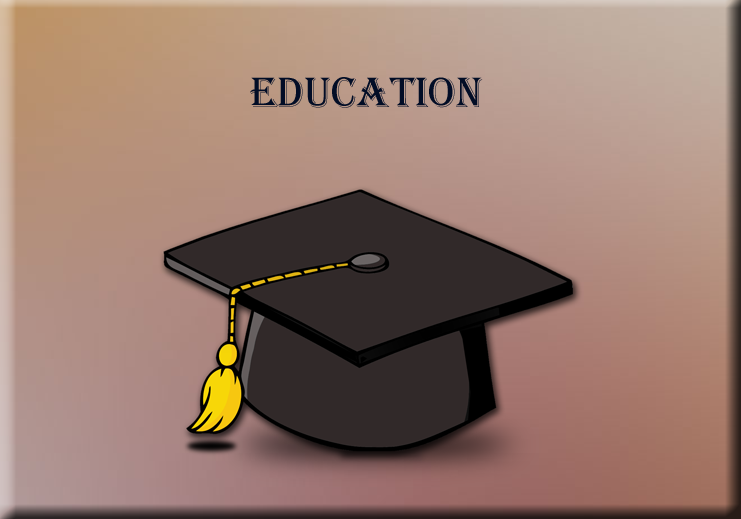
<style>
.page{position:relative;width:741px;height:519px}
.page>*{position:absolute;margin:0}
.t1{font:44px "Algerian";color:#020d26}
</style>
<div class="page">
<p class="t1" style="left:250px;top:77px;width:233px;height:31px">Education</p>
</div>
